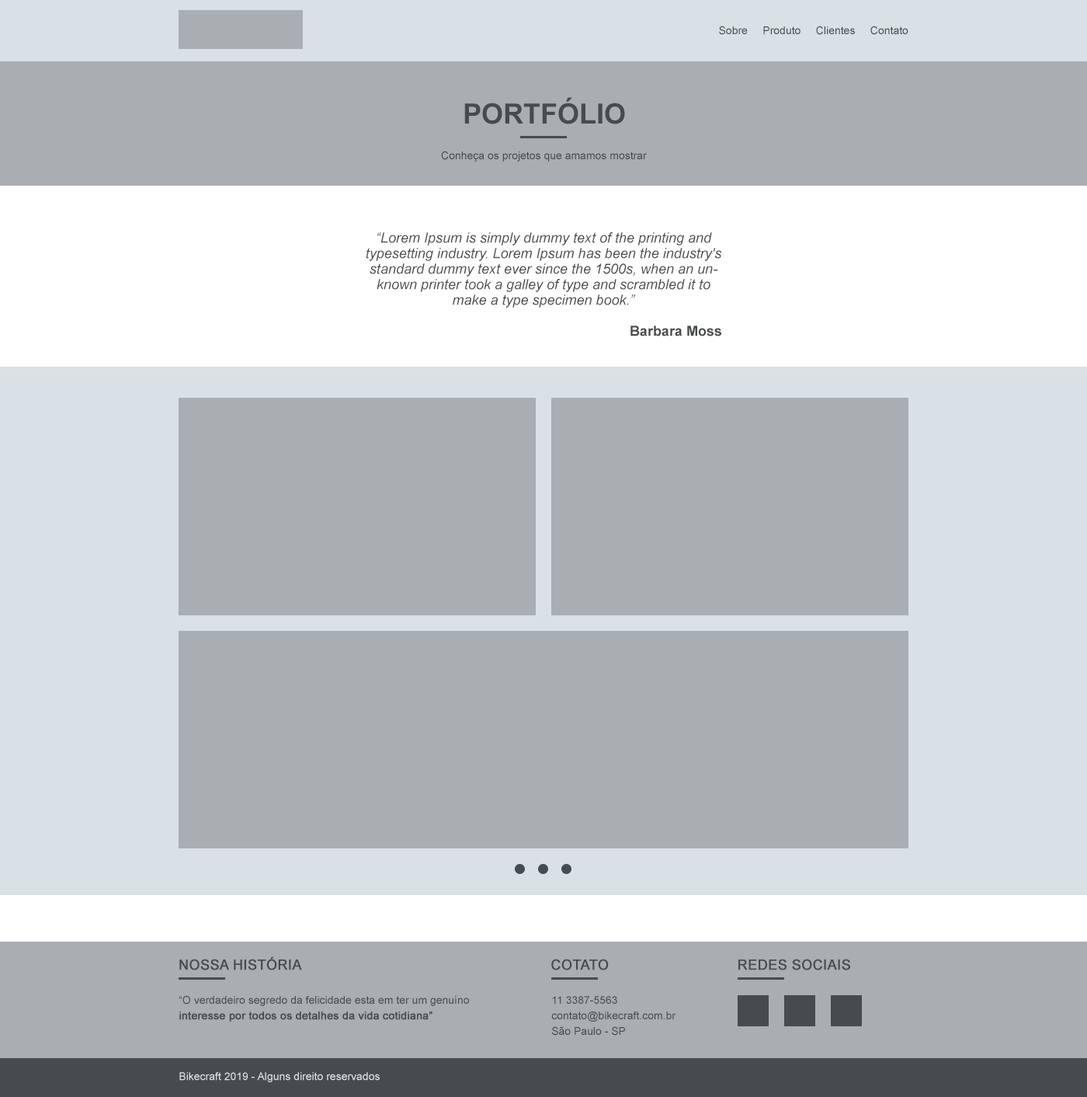
<style>
.page{position:relative;width:1087px;height:1097px;background:#a9aeb3}
.page>*{position:absolute;margin:0}
.t1{font:10.9px "ArialMT";color:#484b4d}
.t2{font:28px "Arial-BoldMT";color:#484b4d;text-transform:uppercase}
.t3{font:14px/15.5px "Arial-ItalicMT";color:#484b4d}
.t4{font:14px/15.5px "Arial-BoldMT";color:#484b4d}
.t5{font:14px "ArialMT";color:#484b4d;text-transform:uppercase;font-weight:bold}
.t6{font:10.9px/15.5px "ArialMT";color:#484b4d}
.t7{font:10.9px/15.5px "ArialMT";color:#484b4d;text-transform:uppercase}
.t8{font:10.9px/15.5px "ArialMT";color:#484b4d;font-weight:bold}
.t9{font:10.9px "ArialMT";color:#d9e0e6}
</style>
<div class="page">
<p class="t1" style="left:719px;top:26px;width:190px;height:9px">Sobre     Produto     Clientes     Contato</p>
<p class="t2" style="left:464px;top:97px;width:161px;height:27px">portfólio</p>
<p class="t1" style="left:441px;top:151px;width:206px;height:11px">Conheça os projetos que amamos mostrar</p>
<p class="t3" style="left:366px;top:232px;width:356px;height:104px;text-align:center">“Lorem Ipsum is simply dummy text of the printing and typesetting industry. Lorem Ipsum has been the industry's standard dummy text ever since the 1500s, when an unknown printer took a galley of type and scrambled it to make a type specimen book.”<br><br><span class="t4">Barbara Moss</span></p>
<p class="t5" style="left:179px;top:956px;width:123px;height:14px">Nossa história</p>
<p class="t5" style="left:551px;top:958px;width:58px;height:12px">cotato</p>
<p class="t5" style="left:739px;top:958px;width:111px;height:12px">redes sociais</p>
<p class="t6" style="left:179px;top:995px;width:290px;height:26px"><span class="t7">“O </span>verdadeiro segredo da felicidade esta em ter um genuíno <span class="t8">interesse por todos os detalhes da vida cotidiana”</span></p>
<p class="t6" style="left:551px;top:996px;width:125px;height:39px"><span class="t7">11 3387-5563<br></span>contato@bikecraft.com.br<br>São Paulo - SP</p>
<p class="t9" style="left:179px;top:1072px;width:201px;height:10px">Bikecraft 2019 - Alguns direito reservados</p>
</div>
